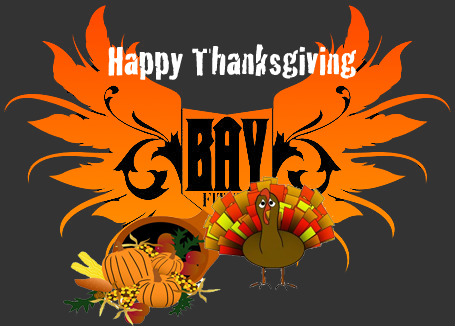
<style>
.page{position:relative;width:455px;height:326px;background:#333333}
.page>*{position:absolute;margin:0}
.t1{font:41.7px "Cracked";color:#ffffff}
</style>
<div class="page">
<p class="t1" style="left:108px;top:44px;width:248px;height:36px">Happy Thanksgiving</p>
</div>
